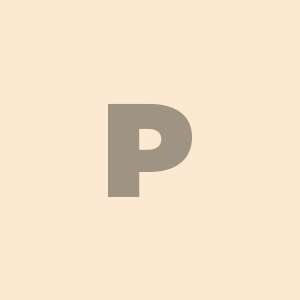
<style>
.page{position:relative;width:300px;height:300px;background:#fbe9d1}
.page>*{position:absolute;margin:0}
.t1{font:133.2px "Gotham-Ultra";letter-spacing:0.52em;color:#9f9384}
</style>
<div class="page">
<p class="t1" style="left:108px;top:103px;width:84px;height:94px">P</p>
</div>
